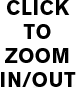
<style>
.page{position:relative;width:76px;height:88px;background:#ffffff}
.page>*{position:absolute;margin:0}
.t1{font:20px "AkzidenzGroteskBQ-Bold";letter-spacing:0.04em;color:#000000}
</style>
<div class="page">
<p class="t1" style="left:1px;top:0px;width:75px;height:87px;text-align:center">CLICK<br>TO ZOOM<br>IN/OUT</p>
</div>
